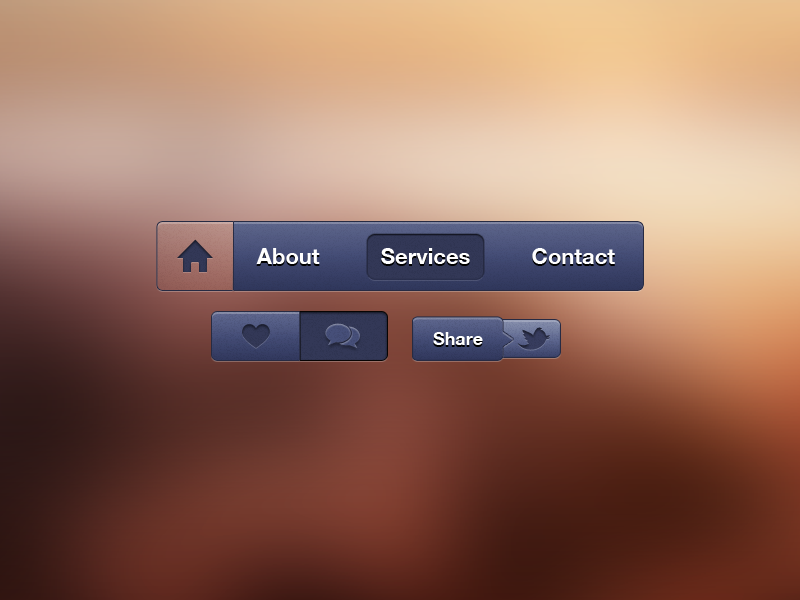
<style>
.page{position:relative;width:800px;height:600px}
.page>*{position:absolute;margin:0}
.t1{font:22px "HelveticaNeueCE-Bold";color:#ffffff}
.t2{font:18px "HelveticaNeueCE-Bold";color:#ffffff}
</style>
<div class="page">
<p class="t1" style="left:256px;top:248px;width:359px;height:16px">About          Services          Contact</p>
<p class="t2" style="left:433px;top:332px;width:50px;height:13px">Share</p>
</div>
